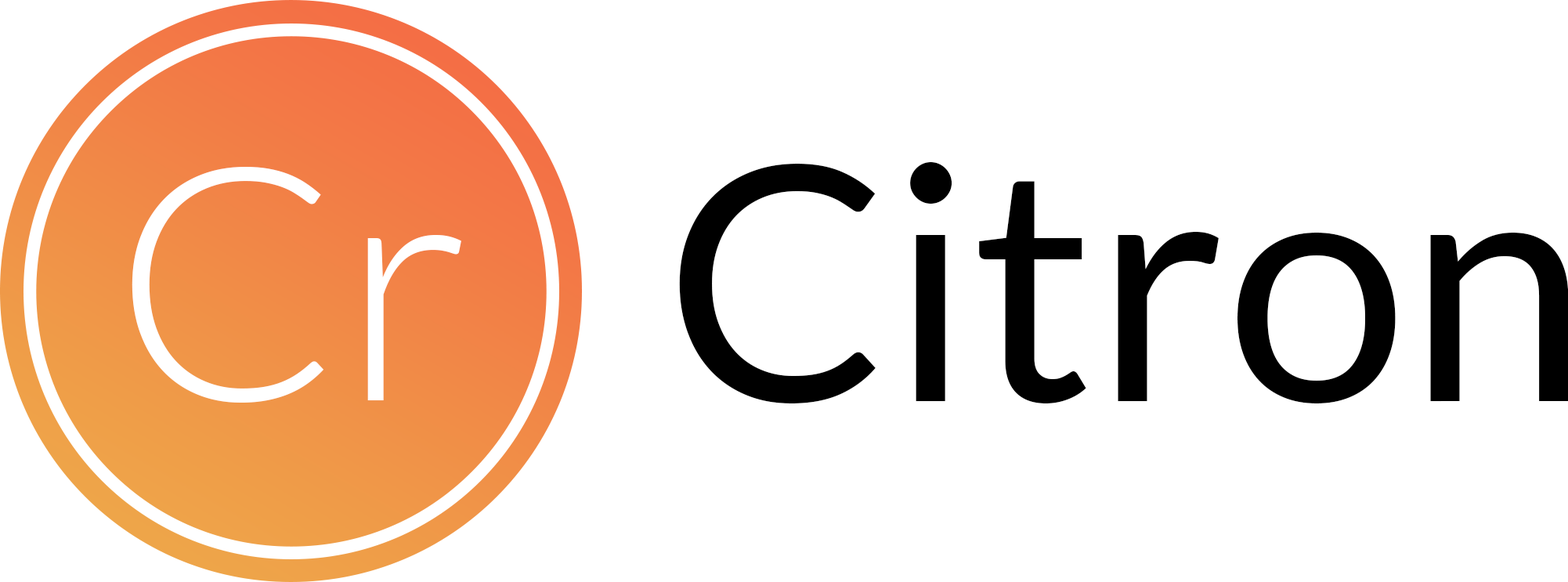
<style>
.page{position:relative;width:1568px;height:582px;background:#ffffff}
.page>*{position:absolute;margin:0}
.t1{font:326.3px "Lato-Light";color:#ffffff}
.t2{font:326.3px "Lato-Regular";color:#000000}
</style>
<div class="page">
<p class="t1" style="left:132px;top:167px;width:329px;height:236px">Cr</p>
<p class="t2" style="left:679px;top:162px;width:890px;height:241px">Citron</p>
</div>
